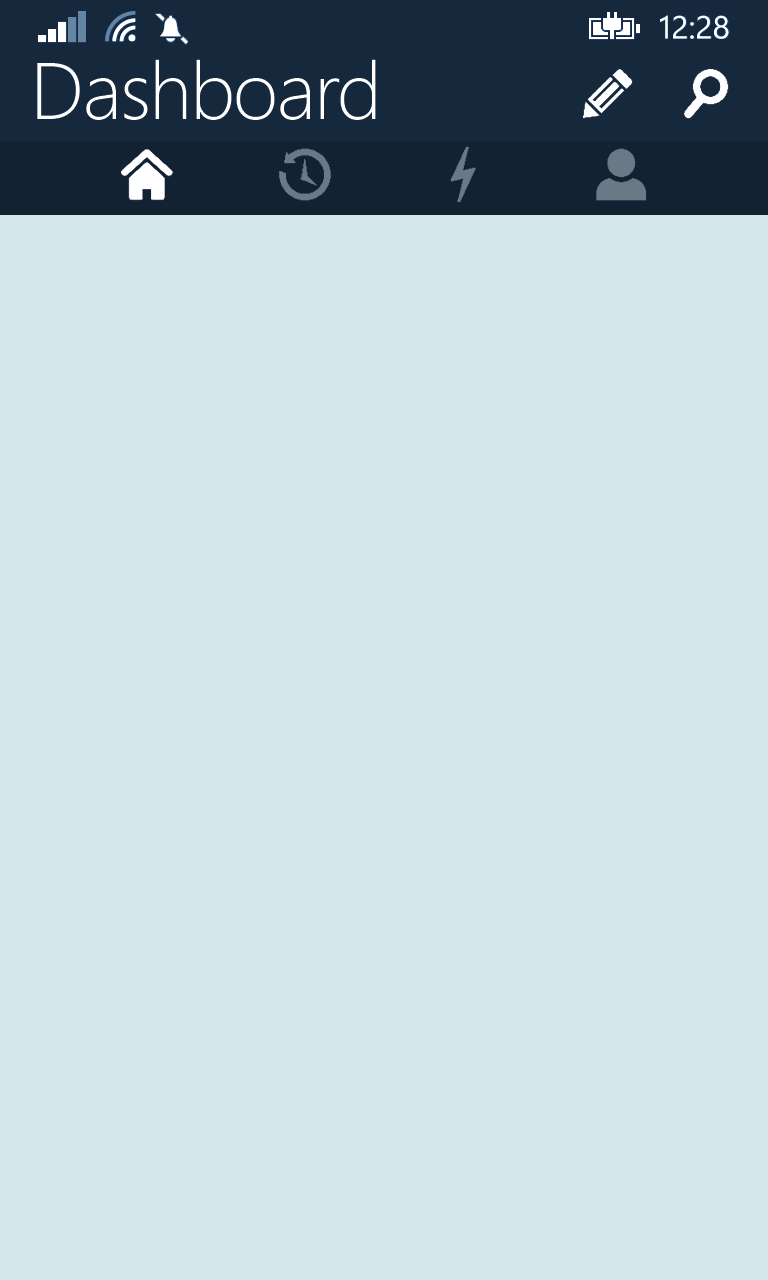
<style>
.page{position:relative;width:768px;height:1280px;background:#d4e7ea}
.page>*{position:absolute;margin:0}
.t1{font:79.9px "SegoeUI-Light";letter-spacing:-0.025em;color:#ffffff}
</style>
<div class="page">
<p class="t1" style="left:37px;top:59px;width:339px;height:61px">Dashboard</p>
</div>
